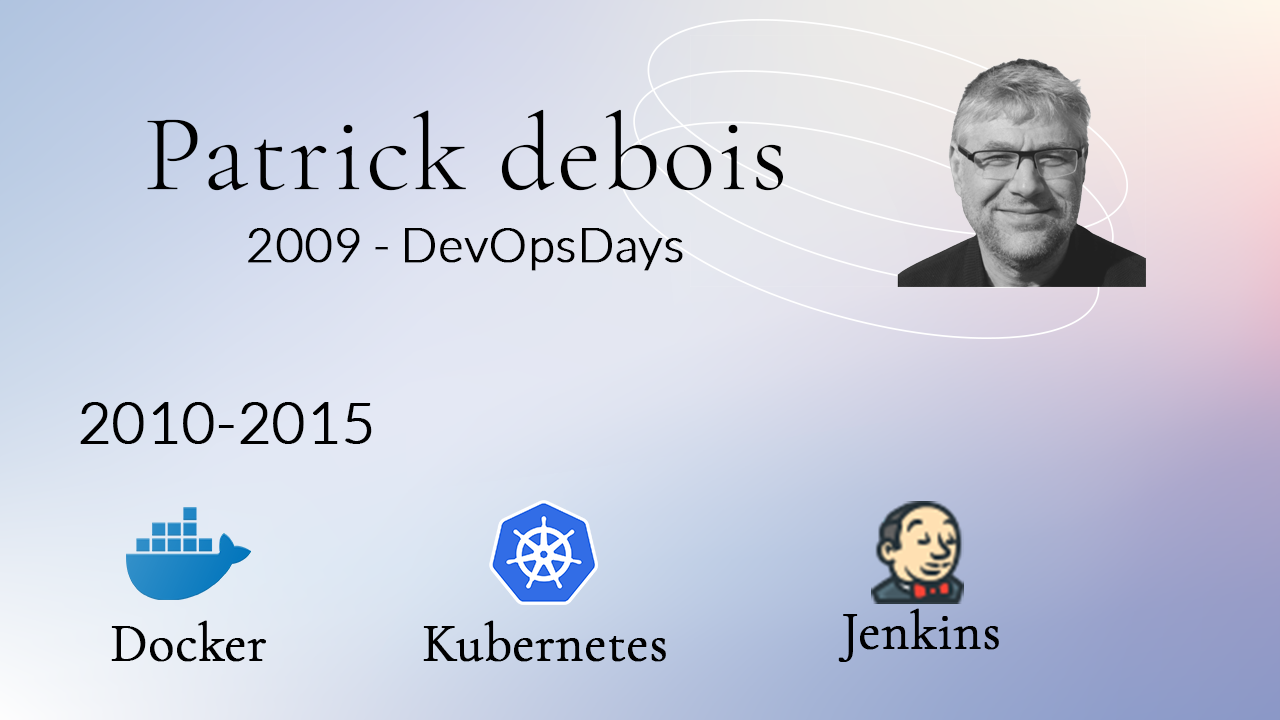
<style>
.page{position:relative;width:1280px;height:720px}
.page>*{position:absolute;margin:0}
.t1{font:109.4px "CormorantGaramond-Light";color:#000000;font-weight:bold}
.t2{font:48px "Lato-Light";color:#000000;font-weight:bold}
.t3{font:57.4px "Lato-Light";color:#000000;font-weight:bold}
.t4{font:52.9px "CormorantGaramond-Light";color:#000000;font-weight:bold}
</style>
<div class="page">
<p class="t1" style="left:147px;top:109px;width:636px;height:82px">Patrick debois</p>
<p class="t2" style="left:248px;top:228px;width:435px;height:43px">2009 - DevOpsDays</p>
<p class="t3" style="left:80px;top:402px;width:292px;height:42px">2010-2015</p>
<p class="t4" style="left:838px;top:608px;width:161px;height:54px">Jenkins</p>
<p class="t4" style="left:111px;top:620px;width:155px;height:42px">Docker</p>
<p class="t4" style="left:423px;top:620px;width:243px;height:42px">Kubernetes</p>
</div>
